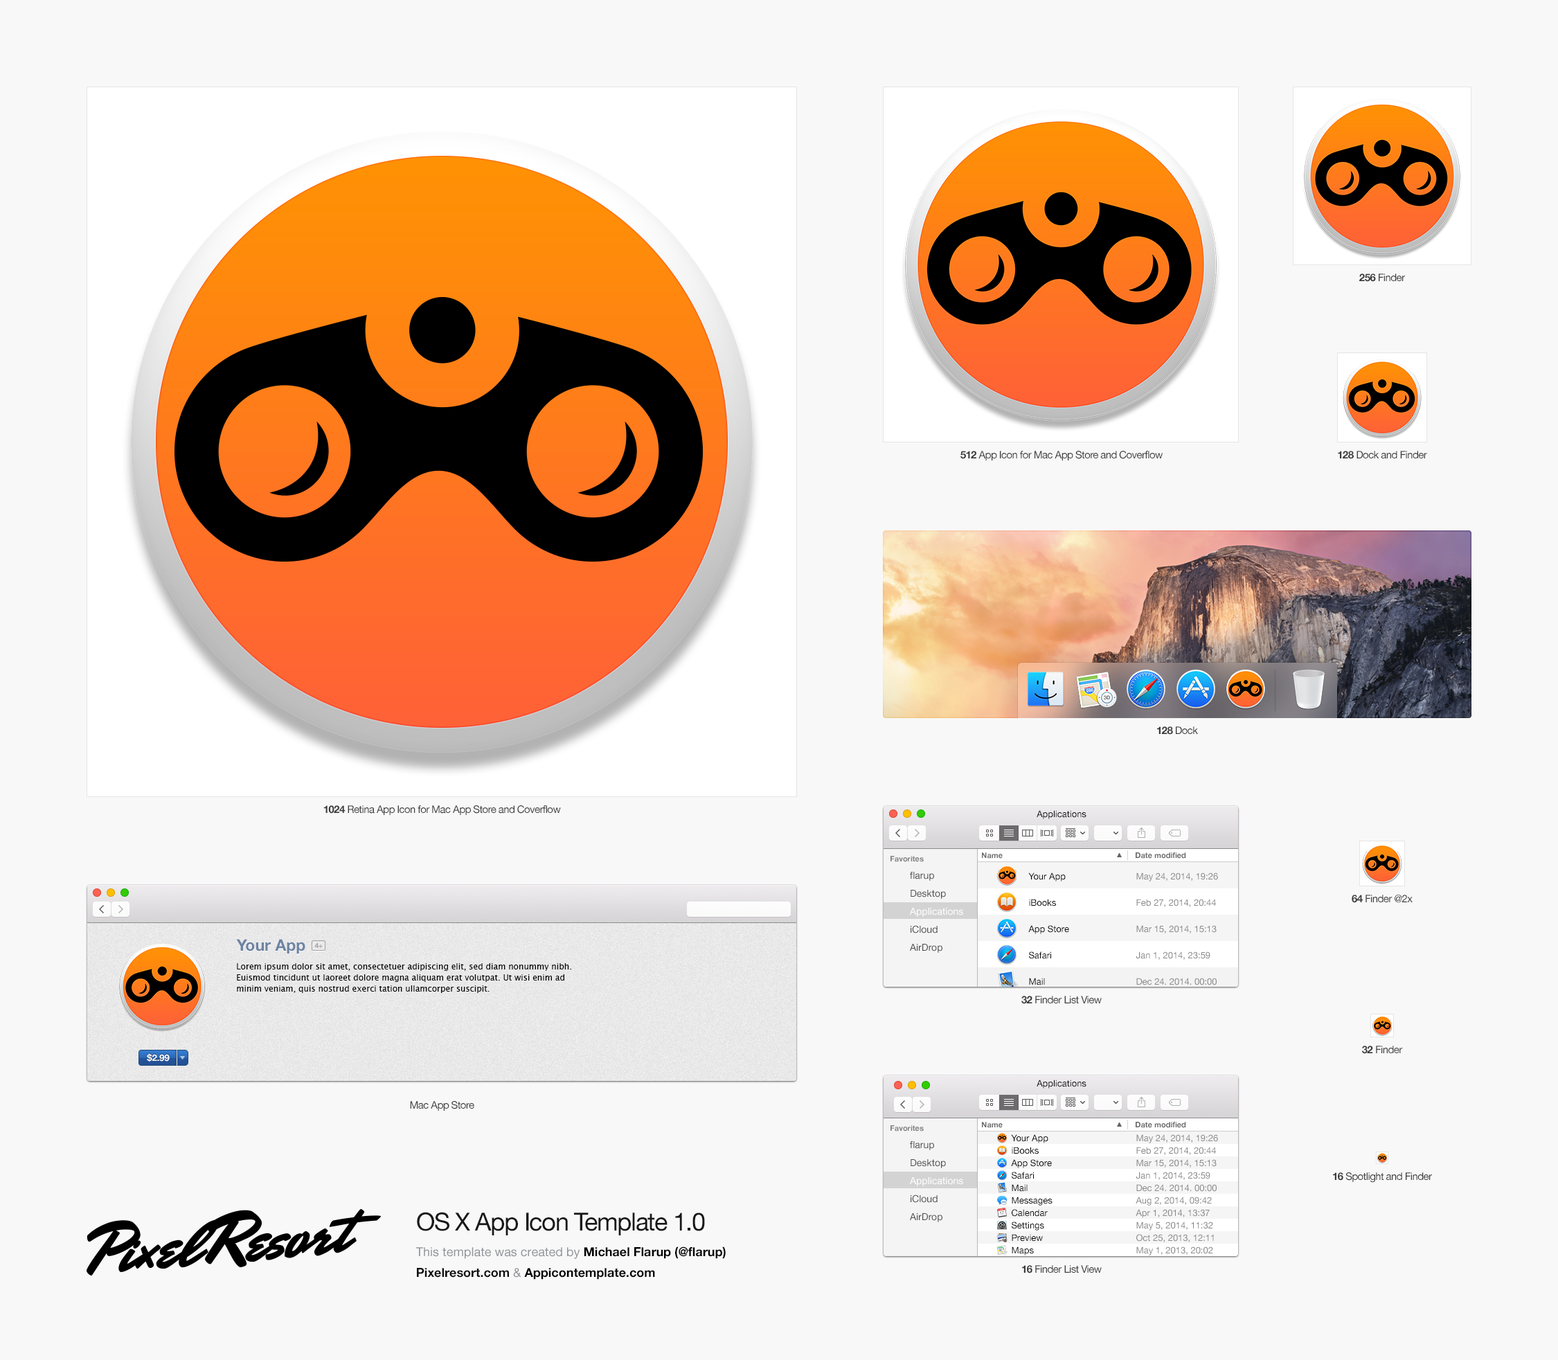
<style>
.page{position:relative;width:1558px;height:1360px;background:#f8f8f8}
.page>*{position:absolute;margin:0}
.t1{font:10.4px "HelveticaNeue";letter-spacing:-0.04em;color:#3c3c3c}
.t2{font:10.4px "HelveticaNeue-Bold";letter-spacing:-0.04em;color:#3c3c3c}
.t3{font:9px "HelveticaNeue";color:#000000}
.t4{font:7.6px "HelveticaNeue-Bold";color:#7f7f7f}
.t5{font:7.6px "HelveticaNeue-Bold";color:#686868}
.t6{font:9.7px/18px "HelveticaNeue";color:#4d4d4d}
.t7{font:9.7px/18px "HelveticaNeue";color:#ffffff}
.t8{font:9px "HelveticaNeue";color:#8a8a8a}
.t9{font:15.9px "HelveticaNeue-Bold";color:#6d83a2}
.t10{font:6.9px "HelveticaNeue-Bold";color:#a0a0a0}
.t11{font:8.3px/11.1px "LucidaGrande";color:#000000}
.t12{font:9px "HelveticaNeue-Bold";color:#ffffff}
.t13{font:24.9px "HelveticaNeue";letter-spacing:-0.04em;color:#171717}
.t14{font:12.4px/20.8px "HelveticaNeue";color:#8f9297}
.t15{font:12.4px/20.8px "HelveticaNeue-Bold";color:#000000}
.t16{font:12.4px/20.8px "HelveticaNeue-Bold";color:#0e0e0e}
</style>
<div class="page">
<p class="t1" style="left:1359px;top:273px;width:46px;height:9px"><span class="t2">256 </span>Finder</p>
<p class="t1" style="left:960px;top:451px;width:202px;height:9px"><span class="t2">512 </span>App Icon for Mac App Store and Coverflow</p>
<p class="t1" style="left:1338px;top:451px;width:89px;height:8px"><span class="t2">128 </span>Dock and Finder</p>
<p class="t1" style="left:1157px;top:726px;width:41px;height:9px"><span class="t2">128 </span>Dock</p>
<p class="t1" style="left:323px;top:805px;width:238px;height:10px"><span class="t2">1024 </span>Retina App Icon for Mac App Store and Coverflow</p>
<p class="t3" style="left:1036px;top:810px;width:50px;height:9px">Applications</p>
<p class="t4" style="left:890px;top:856px;width:34px;height:6px">Favorites</p>
<p class="t5" style="left:982px;top:852px;width:20px;height:6px">Name</p>
<p class="t5" style="left:1135px;top:852px;width:51px;height:6px">Date modified</p>
<p class="t6" style="left:910px;top:872px;width:53px;height:81px">flarup<br>Desktop<br><span class="t7">Applications<br></span>iCloud<br>AirDrop</p>
<p class="t3" style="left:1028px;top:872px;width:37px;height:9px">Your App</p>
<p class="t8" style="left:1136px;top:872px;width:82px;height:9px">May 24, 2014, 19:26</p>
<p class="t3" style="left:1029px;top:899px;width:27px;height:7px">iBooks</p>
<p class="t8" style="left:1136px;top:899px;width:80px;height:8px">Feb 27, 2014, 20:44</p>
<p class="t1" style="left:1351px;top:894px;width:61px;height:9px"><span class="t2">64 </span>Finder @2x</p>
<p class="t3" style="left:1028px;top:925px;width:41px;height:9px">App Store</p>
<p class="t8" style="left:1136px;top:925px;width:80px;height:8px">Mar 15, 2014, 15:13</p>
<p class="t9" style="left:236px;top:939px;width:69px;height:15px">Your App</p>
<p class="t10" style="left:314px;top:943px;width:9px;height:5px">4+</p>
<p class="t3" style="left:1029px;top:951px;width:22px;height:8px">Safari</p>
<p class="t8" style="left:1135px;top:951px;width:75px;height:9px">Jan 1, 2014, 23:59</p>
<p class="t11" style="left:237px;top:963px;width:334px;height:30px">Lorem ipsum dolor sit amet, consectetuer adipiscing elit, sed diam nonummy nibh.<br>Euismod tincidunt ut laoreet dolore magna aliquam erat volutpat. Ut wisi enim ad<br>minim veniam, quis nostrud exerci tation ullamcorper suscipit.</p>
<p class="t3" style="left:1029px;top:978px;width:16px;height:7px">Mail</p>
<p class="t8" style="left:1136px;top:978px;width:80px;height:7px">Dec 24. 2014. 00:00</p>
<p class="t1" style="left:1021px;top:996px;width:80px;height:8px"><span class="t2">32 </span>Finder List View</p>
<p class="t1" style="left:1362px;top:1045px;width:41px;height:9px"><span class="t2">32 </span>Finder</p>
<p class="t12" style="left:147px;top:1053px;width:23px;height:9px">$2.99</p>
<p class="t3" style="left:1036px;top:1079px;width:50px;height:9px">Applications</p>
<p class="t1" style="left:410px;top:1101px;width:64px;height:9px">Mac App Store</p>
<p class="t5" style="left:982px;top:1122px;width:20px;height:6px">Name</p>
<p class="t5" style="left:1135px;top:1122px;width:51px;height:6px">Date modified</p>
<p class="t4" style="left:890px;top:1125px;width:34px;height:6px">Favorites</p>
<p class="t3" style="left:1011px;top:1134px;width:37px;height:9px">Your App</p>
<p class="t8" style="left:1136px;top:1134px;width:82px;height:9px">May 24, 2014, 19:26</p>
<p class="t6" style="left:910px;top:1141px;width:53px;height:81px">flarup<br>Desktop<br><span class="t7">Applications<br></span>iCloud<br>AirDrop</p>
<p class="t3" style="left:1011px;top:1146px;width:27px;height:8px">iBooks</p>
<p class="t8" style="left:1136px;top:1146px;width:80px;height:9px">Feb 27, 2014, 20:44</p>
<p class="t3" style="left:1011px;top:1159px;width:41px;height:9px">App Store</p>
<p class="t8" style="left:1136px;top:1159px;width:80px;height:8px">Mar 15, 2014, 15:13</p>
<p class="t3" style="left:1011px;top:1171px;width:23px;height:8px">Safari</p>
<p class="t8" style="left:1135px;top:1171px;width:75px;height:9px">Jan 1, 2014, 23:59</p>
<p class="t1" style="left:1333px;top:1172px;width:99px;height:10px"><span class="t2">16 </span>Spotlight and Finder</p>
<p class="t3" style="left:1011px;top:1184px;width:16px;height:7px">Mail</p>
<p class="t8" style="left:1136px;top:1184px;width:80px;height:7px">Dec 24. 2014. 00:00</p>
<p class="t3" style="left:1011px;top:1196px;width:41px;height:9px">Messages</p>
<p class="t8" style="left:1135px;top:1196px;width:77px;height:9px">Aug 2, 2014, 09:42</p>
<p class="t13" style="left:417px;top:1212px;width:288px;height:23px">OS X App Icon Template 1.0</p>
<p class="t3" style="left:1011px;top:1209px;width:36px;height:7px">Calendar</p>
<p class="t8" style="left:1135px;top:1209px;width:74px;height:9px">Apr 1, 2014, 13:37</p>
<p class="t3" style="left:1011px;top:1221px;width:33px;height:9px">Settings</p>
<p class="t8" style="left:1136px;top:1221px;width:77px;height:9px">May 5, 2014, 11:32</p>
<p class="t3" style="left:1011px;top:1234px;width:32px;height:7px">Preview</p>
<p class="t8" style="left:1136px;top:1234px;width:78px;height:8px">Oct 25, 2013, 12:11</p>
<p class="t14" style="left:415px;top:1246px;width:311px;height:33px">This template was created by <span class="t15">Michael Flarup (@flarup)<br></span><span class="t16">Pixelresort.com </span>&amp; <span class="t15">Appicontemplate.com</span></p>
<p class="t3" style="left:1011px;top:1246px;width:23px;height:9px">Maps</p>
<p class="t8" style="left:1136px;top:1246px;width:77px;height:9px">May 1, 2013, 20:02</p>
<p class="t1" style="left:1022px;top:1265px;width:79px;height:8px"><span class="t2">16 </span>Finder List View</p>
</div>
